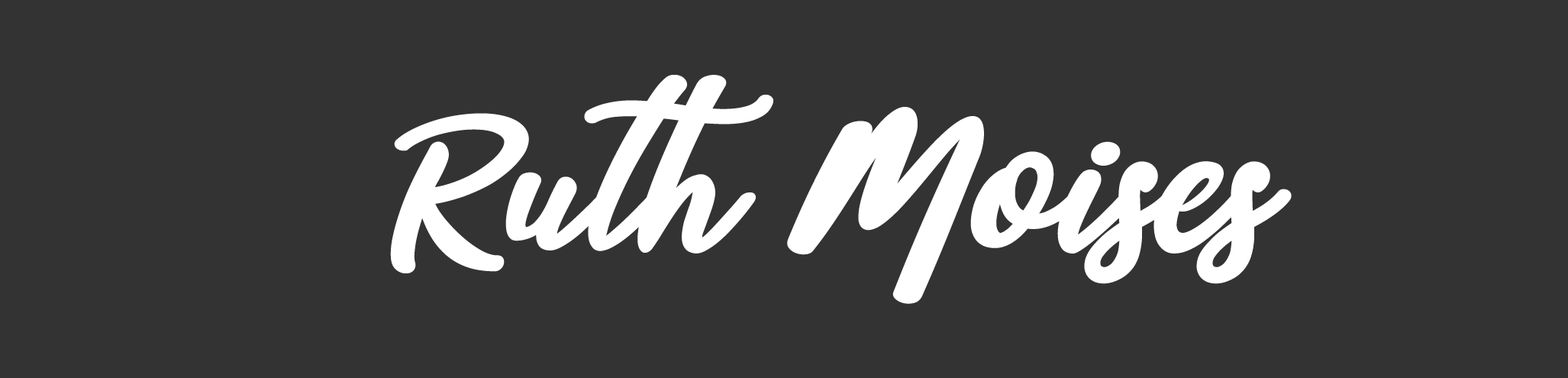
<style>
.page{position:relative;width:1568px;height:378px;background:#333333}
.page>*{position:absolute;margin:0}
.t1{font:194.9px "sophia-script";letter-spacing:-0.01em;color:#ffffff}
</style>
<div class="page">
<p class="t1" style="left:390px;top:75px;width:383px;height:198px">Ruth</p>
<p class="t1" style="left:787px;top:107px;width:505px;height:197px">Moises</p>
</div>
